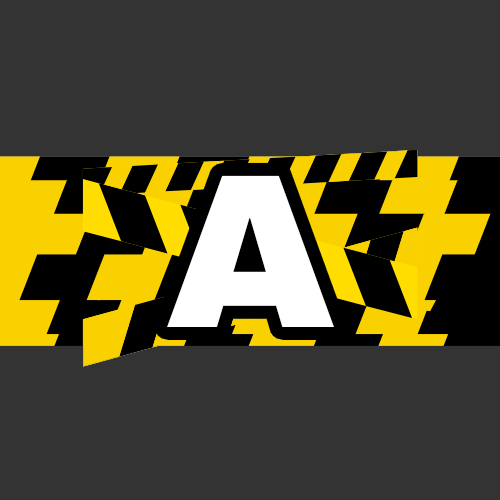
<style>
.page{position:relative;width:500px;height:500px;background:#333333}
.page>*{position:absolute;margin:0}
.t1{font:219.5px "ArchivoBlack-Regular";color:#ffffff}
</style>
<div class="page">
<p class="t1" style="left:167px;top:175px;width:167px;height:152px">A</p>
</div>
